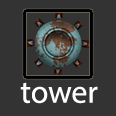
<style>
.page{position:relative;width:116px;height:116px;background:#333333}
.page>*{position:absolute;margin:0}
.t1{font:32px "MyriadPro-Regular";color:#ffffff}
</style>
<div class="page">
<p class="t1" style="left:20px;top:82px;width:78px;height:22px">tower</p>
</div>
